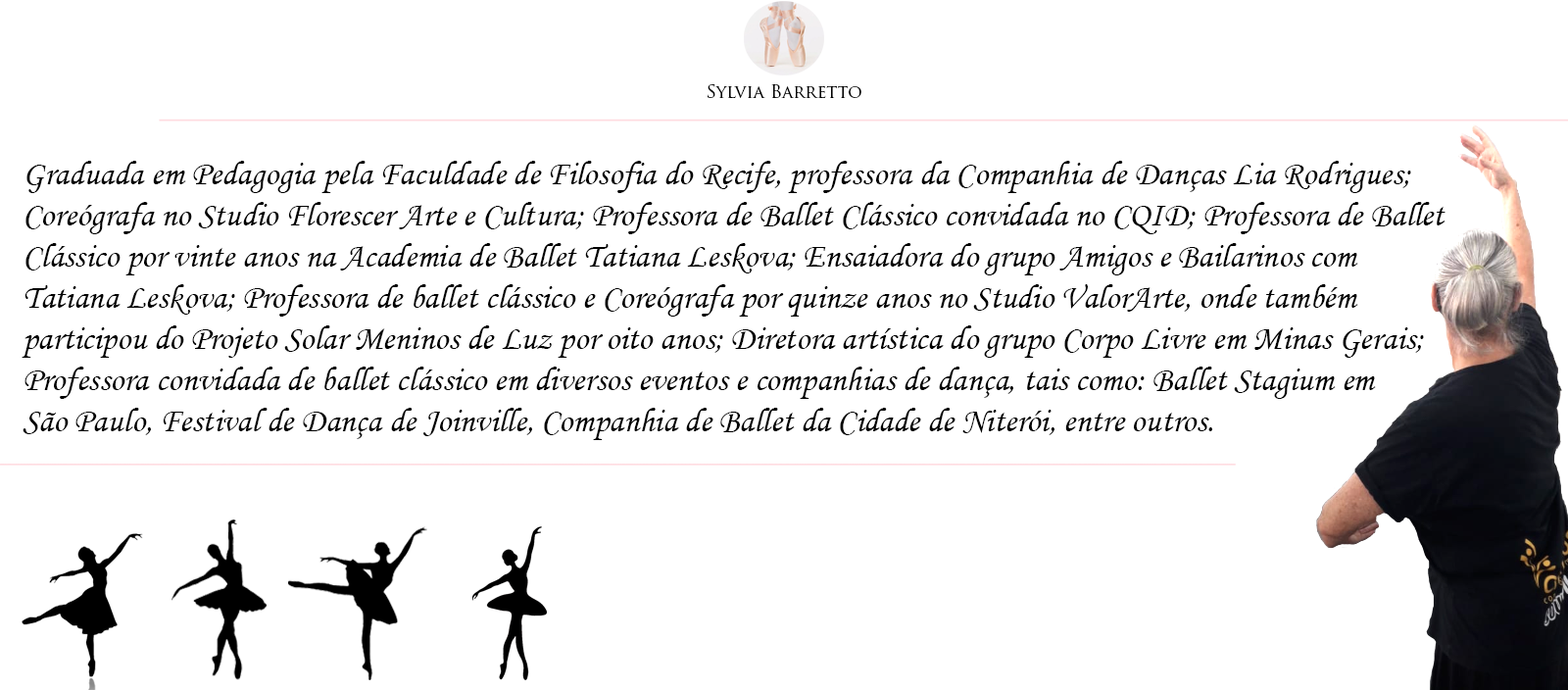
<style>
.page{position:relative;width:1568px;height:690px;background:#ffffff}
.page>*{position:absolute;margin:0}
.t1{font:17.6px "TrajanPro-Regular";color:#000000}
.t2{font:34.3px "MonotypeCorsiva";color:#000000}
</style>
<div class="page">
<p class="t1" style="left:708px;top:84px;width:153px;height:14px">Sylvia Barretto</p>
<p class="t2" style="left:22px;top:161px;width:1424px;height:279px;text-align:right">Graduada em Pedagogia pela Faculdade de Filosofia do Recife, professora da Companhia de Danças Lia Rodrigues; <br>Coreógrafa no Studio Florescer Arte e Cultura; Professora de Ballet Clássico convidada no CQID; Professora de Ballet <br>Clássico por vinte anos na Academia de Ballet Tatiana Leskova; Ensaiadora do grupo Amigos e Bailarinos com <br>Tatiana Leskova; Professora de ballet clássico e Coreógrafa por quinze anos no Studio ValorArte, onde também <br>participou do Projeto Solar Meninos de Luz por oito anos; Diretora artística do grupo Corpo Livre em Minas Gerais; <br>Professora convidada de ballet clássico em diversos eventos e companhias de dança, tais como: Ballet Stagium em <br>São Paulo, Festival de Dança de Joinville, Companhia de Ballet da Cidade de Niterói, entre outros.</p>
</div>
